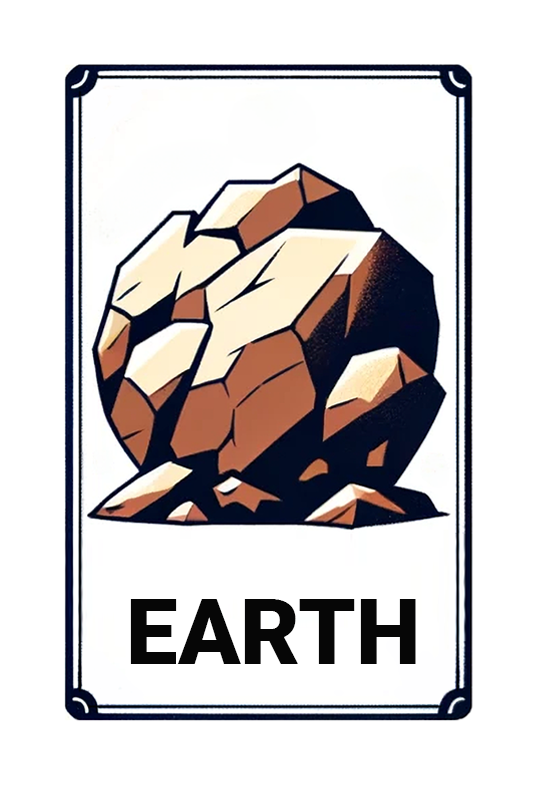
<style>
.page{position:relative;width:534px;height:785px;background:#ffffff}
.page>*{position:absolute;margin:0}
.t1{font:92px "Roboto-Black";color:#060606}
</style>
<div class="page">
<p class="t1" style="left:130px;top:599px;width:286px;height:65px">EARTH</p>
</div>
